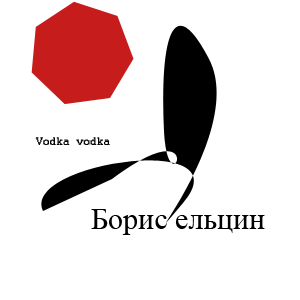
<style>
.page{position:relative;width:300px;height:300px;background:#ffffff}
.page>*{position:absolute;margin:0}
.t1{font:12px "Courier";color:#000000}
.t2{font:30px "TimesNewRomanPSMT";color:#000000}
</style>
<div class="page">
<p class="t1" style="left:35px;top:137px;width:75px;height:8px">Vodka vodka</p>
<p class="t2" style="left:91px;top:209px;width:174px;height:26px">Борис ельцин</p>
</div>
